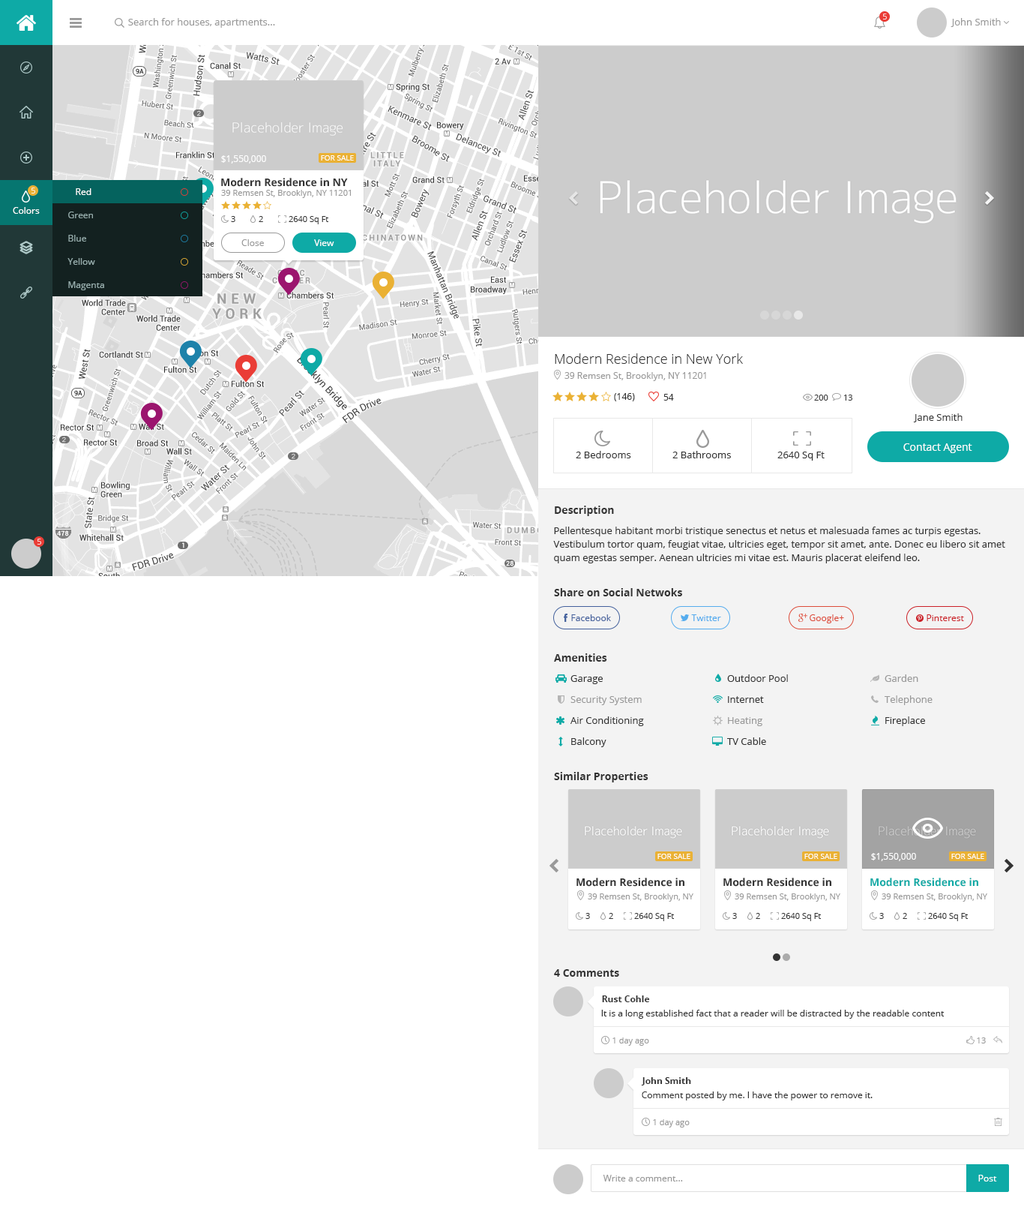
<style>
.page{position:relative;width:1024px;height:1210px;background:#ffffff}
.page>*{position:absolute;margin:0}
.t1{font:8.2px "OpenSans"}
.t2{font:9.8px "OpenSans";color:#999999}
.t3{font:9px "OpenSans";color:#ffffff}
.t4{font:7.5px "OpenSans";color:#ffffff}
.t5{font:10.5px "OpenSans-Bold";color:#333333}
.t6{font:8.2px "OpenSans";color:#999999}
.t7{font:9px "OpenSans";color:#96adac}
.t8{font:8.2px "OpenSans";color:#333333}
.t9{font:9px "OpenSans";color:#999999}
.t10{font:13.5px "OpenSans-Light";color:#333333}
.t11{font:9px "OpenSans";color:#333333}
.t12{font:9.8px "OpenSans";color:#333333}
.t13{font:10.5px "OpenSans";color:#ffffff}
.t14{font:9.8px/13.5px "OpenSans";color:#333333}
.t15{font:9px "OpenSans";color:#43609c}
.t16{font:9px "OpenSans";color:#55acee}
.t17{font:9px "OpenSans";color:#dd4b39}
.t18{font:9px "OpenSans";color:#cb2027}
.t19{font:10.5px "OpenSans-Bold";color:#0eaaa6}
.t20{font:9px "OpenSans-Bold";color:#333333}
</style>
<div class="page">
<p class="t1" style="left:884px;top:14px;width:3px;height:6px">5</p>
<p class="t2" style="left:128px;top:18px;width:147px;height:10px">Search for houses, apartments...</p>
<p class="t2" style="left:951px;top:18px;width:50px;height:9px">John Smith</p>
<p class="t3" style="left:221px;top:155px;width:45px;height:9px">$1,550,000</p>
<p class="t4" style="left:321px;top:155px;width:33px;height:5px">FOR SALE</p>
<p class="t5" style="left:221px;top:178px;width:127px;height:9px">Modern Residence in NY</p>
<p class="t1" style="left:32px;top:188px;width:3px;height:6px">5</p>
<p class="t3" style="left:76px;top:188px;width:16px;height:7px">Red</p>
<p class="t6" style="left:221px;top:190px;width:130px;height:8px">39 Remsen St, Brooklyn, NY 11201</p>
<p class="t3" style="left:13px;top:207px;width:27px;height:7px">Colors</p>
<p class="t7" style="left:68px;top:212px;width:25px;height:6px">Green</p>
<p class="t8" style="left:231px;top:216px;width:5px;height:6px">3</p>
<p class="t8" style="left:259px;top:216px;width:4px;height:6px">2</p>
<p class="t8" style="left:289px;top:216px;width:39px;height:8px">2640 Sq Ft</p>
<p class="t7" style="left:68px;top:235px;width:18px;height:7px">Blue</p>
<p class="t9" style="left:242px;top:239px;width:22px;height:7px">Close</p>
<p class="t3" style="left:314px;top:239px;width:20px;height:7px">View</p>
<p class="t7" style="left:68px;top:258px;width:27px;height:7px">Yellow</p>
<p class="t7" style="left:68px;top:281px;width:36px;height:9px">Magenta</p>
<p class="t10" style="left:555px;top:353px;width:188px;height:11px">Modern Residence in New York</p>
<p class="t9" style="left:565px;top:372px;width:141px;height:9px">39 Remsen St, Brooklyn, NY 11201</p>
<p class="t11" style="left:614px;top:393px;width:21px;height:8px">(146)</p>
<p class="t11" style="left:664px;top:394px;width:10px;height:6px">54</p>
<p class="t8" style="left:814px;top:394px;width:15px;height:6px">200</p>
<p class="t8" style="left:844px;top:394px;width:9px;height:6px">13</p>
<p class="t12" style="left:914px;top:413px;width:49px;height:9px">Jane Smith</p>
<p class="t13" style="left:904px;top:443px;width:69px;height:10px">Contact Agent</p>
<p class="t12" style="left:576px;top:451px;width:56px;height:7px">2 Bedrooms</p>
<p class="t12" style="left:673px;top:451px;width:58px;height:7px">2 Bathrooms</p>
<p class="t12" style="left:778px;top:452px;width:47px;height:8px">2640 Sq Ft</p>
<p class="t5" style="left:555px;top:506px;width:59px;height:10px">Description</p>
<p class="t14" style="left:554px;top:526px;width:452px;height:37px">Pellentesque habitant morbi tristique senectus et netus et malesuada fames ac turpis egestas. Vestibulum tortor quam, feugiat vitae, ultricies eget, tempor sit amet, ante. Donec eu libero sit amet quam egestas semper. Aenean ultricies mi vitae est. Mauris placerat eleifend leo.</p>
<p class="t1" style="left:38px;top:538px;width:3px;height:6px">5</p>
<p class="t5" style="left:554px;top:588px;width:128px;height:8px">Share on Social Netwoks</p>
<p class="t15" style="left:572px;top:614px;width:39px;height:7px">Facebook</p>
<p class="t16" style="left:692px;top:614px;width:30px;height:7px">Twitter</p>
<p class="t17" style="left:810px;top:614px;width:34px;height:9px">Google+</p>
<p class="t18" style="left:927px;top:614px;width:37px;height:7px">Pinterest</p>
<p class="t5" style="left:554px;top:653px;width:54px;height:9px">Amenities</p>
<p class="t12" style="left:571px;top:675px;width:32px;height:9px">Garage</p>
<p class="t12" style="left:728px;top:674px;width:60px;height:8px">Outdoor Pool</p>
<p class="t2" style="left:885px;top:674px;width:34px;height:8px">Garden</p>
<p class="t2" style="left:571px;top:696px;width:71px;height:9px">Security System</p>
<p class="t12" style="left:728px;top:696px;width:36px;height:7px">Internet</p>
<p class="t2" style="left:885px;top:695px;width:48px;height:10px">Telephone</p>
<p class="t12" style="left:571px;top:716px;width:73px;height:10px">Air Conditioning</p>
<p class="t2" style="left:728px;top:717px;width:35px;height:9px">Heating</p>
<p class="t12" style="left:886px;top:716px;width:40px;height:10px">Fireplace</p>
<p class="t12" style="left:572px;top:737px;width:35px;height:10px">Balcony</p>
<p class="t12" style="left:728px;top:737px;width:38px;height:8px">TV Cable</p>
<p class="t5" style="left:554px;top:772px;width:95px;height:10px">Similar Properties</p>
<p class="t4" style="left:658px;top:854px;width:33px;height:5px">FOR SALE</p>
<p class="t4" style="left:805px;top:854px;width:33px;height:5px">FOR SALE</p>
<p class="t3" style="left:872px;top:853px;width:44px;height:8px">$1,550,000</p>
<p class="t4" style="left:952px;top:854px;width:33px;height:5px">FOR SALE</p>
<p class="t5" style="left:577px;top:878px;width:108px;height:8px">Modern Residence in</p>
<p class="t5" style="left:724px;top:878px;width:108px;height:8px">Modern Residence in</p>
<p class="t19" style="left:871px;top:878px;width:108px;height:8px">Modern Residence in</p>
<p class="t6" style="left:588px;top:893px;width:106px;height:9px">39 Remsen St, Brooklyn, NY</p>
<p class="t6" style="left:735px;top:893px;width:106px;height:9px">39 Remsen St, Brooklyn, NY</p>
<p class="t6" style="left:882px;top:893px;width:106px;height:9px">39 Remsen St, Brooklyn, NY</p>
<p class="t8" style="left:586px;top:913px;width:4px;height:6px">3</p>
<p class="t8" style="left:609px;top:913px;width:5px;height:6px">2</p>
<p class="t8" style="left:634px;top:913px;width:40px;height:8px">2640 Sq Ft</p>
<p class="t8" style="left:733px;top:913px;width:4px;height:6px">3</p>
<p class="t8" style="left:756px;top:913px;width:4px;height:6px">2</p>
<p class="t8" style="left:782px;top:913px;width:39px;height:8px">2640 Sq Ft</p>
<p class="t8" style="left:880px;top:913px;width:4px;height:6px">3</p>
<p class="t8" style="left:903px;top:913px;width:5px;height:6px">2</p>
<p class="t8" style="left:928px;top:913px;width:40px;height:8px">2640 Sq Ft</p>
<p class="t5" style="left:554px;top:969px;width:66px;height:7px">4 Comments</p>
<p class="t20" style="left:602px;top:995px;width:48px;height:7px">Rust Cohle</p>
<p class="t11" style="left:602px;top:1010px;width:343px;height:8px">It is a long established fact that a reader will be distracted by the readable content</p>
<p class="t6" style="left:613px;top:1037px;width:37px;height:9px">1 day ago</p>
<p class="t6" style="left:977px;top:1037px;width:9px;height:6px">13</p>
<p class="t20" style="left:641px;top:1077px;width:51px;height:8px">John Smith</p>
<p class="t11" style="left:642px;top:1091px;width:231px;height:9px">Comment posted by me. I have the power to remove it.</p>
<p class="t6" style="left:653px;top:1119px;width:37px;height:8px">1 day ago</p>
<p class="t9" style="left:603px;top:1174px;width:80px;height:7px">Write a comment...</p>
<p class="t3" style="left:979px;top:1174px;width:19px;height:7px">Post</p>
</div>
